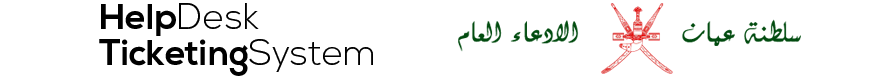
<style>
.page{position:relative;width:886px;height:77px;background:#ffffff}
.page>*{position:absolute;margin:0}
.t1{font:36px/35.5px "NexaBold";color:#000000}
.t2{font:36px/35.5px "NexaLight";color:#000000}
</style>
<div class="page">
<p class="t1" style="left:99px;top:3px;width:274px;height:73px">Help<span class="t2">Desk<br></span>Ticketing<span class="t2">System</span></p>
</div>
